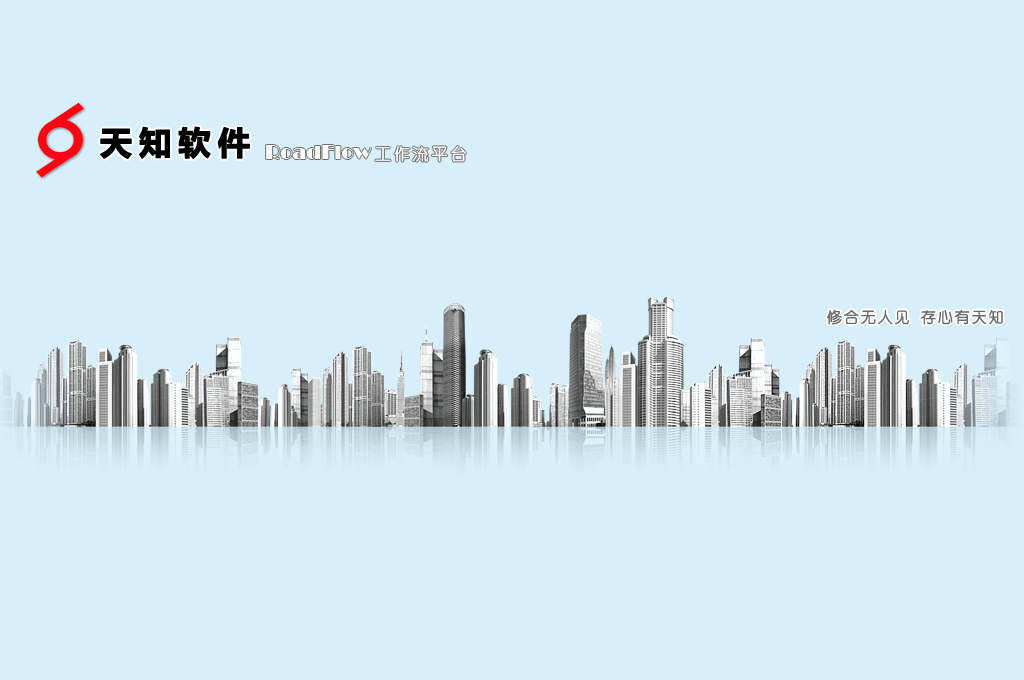
<style>
.page{position:relative;width:1024px;height:680px;background:#d7effb}
.page>*{position:absolute;margin:0}
.t1{font:32px "MicrosoftYaHei-Bold";letter-spacing:0.2em;color:#000000;font-weight:bold}
.t2{font:20px "Broadway";color:#fdfbfb}
.t3{font:16px "YouYuan";letter-spacing:0.15em;color:#fdfbfb;font-weight:bold}
.t4{font:15px "YouYuan";letter-spacing:0.1em;color:#696967;font-weight:bold}
</style>
<div class="page">
<p class="t1" style="left:100px;top:126px;width:150px;height:33px">天知软件</p>
<p class="t2" style="left:266px;top:145px;width:200px;height:17px">RoadFlow <span class="t3">工作流平台</span></p>
<p class="t4" style="left:827px;top:309px;width:176px;height:16px">修合无人见 存心有天知</p>
</div>
